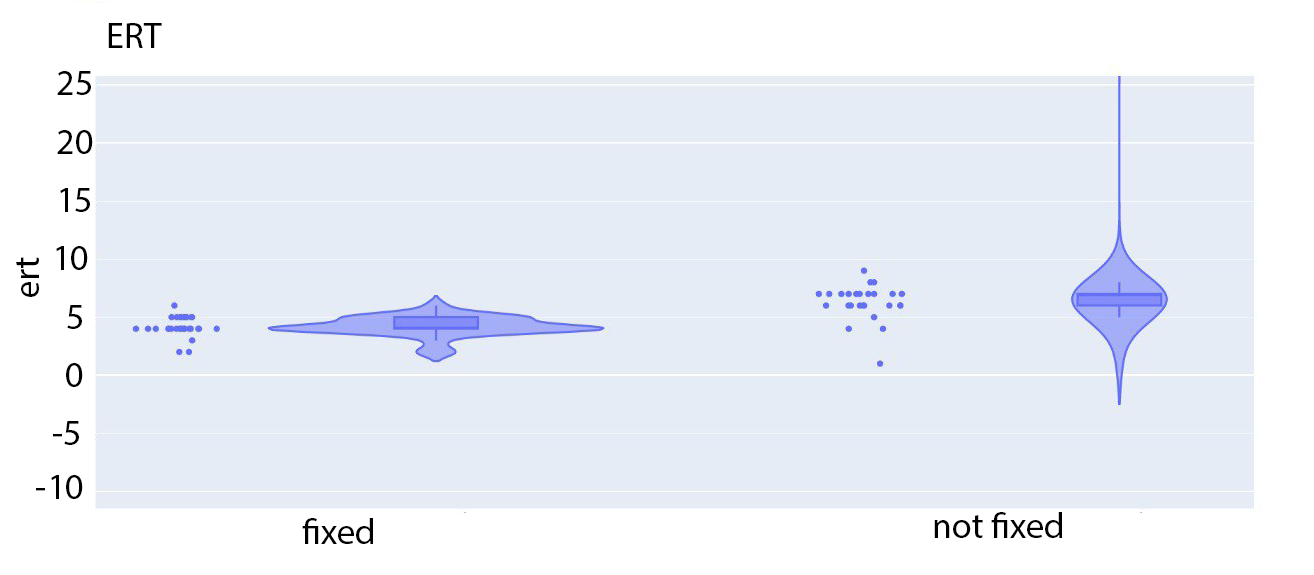
<style>
.page{position:relative;width:1314px;height:575px;background:#e5ecf6}
.page>*{position:absolute;margin:0}
.t1{font:36px "MyriadPro-Regular";color:#000000}
</style>
<div class="page">
<p class="t1" style="left:108px;top:23px;width:54px;height:25px">ERT</p>
<p class="t1" style="left:57px;top:71px;width:34px;height:24px">25</p>
<p class="t1" style="left:57px;top:130px;width:36px;height:24px">20</p>
<p class="t1" style="left:60px;top:188px;width:30px;height:24px">15</p>
<p class="t1" style="left:56px;top:246px;width:32px;height:24px">10</p>
<p class="t1" style="left:16px;top:257px;width:23px;height:40px;rotate:-90deg">ert</p>
<p class="t1" style="left:67px;top:305px;width:15px;height:24px">5</p>
<p class="t1" style="left:66px;top:363px;width:17px;height:24px">0</p>
<p class="t1" style="left:53px;top:421px;width:26px;height:24px">-5</p>
<p class="t1" style="left:36px;top:475px;width:47px;height:24px">-10</p>
<p class="t1" style="left:302px;top:518px;width:71px;height:26px">fixed</p>
<p class="t1" style="left:934px;top:512px;width:128px;height:26px">not fixed</p>
</div>
